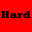
<style>
.page{position:relative;width:32px;height:32px;background:#ff0000}
.page>*{position:absolute;margin:0}
.t1{font:10px "Rockwell-ExtraBold";color:#000000}
</style>
<div class="page">
<p class="t1" style="left:1px;top:11px;width:30px;height:7px">Hard</p>
</div>
